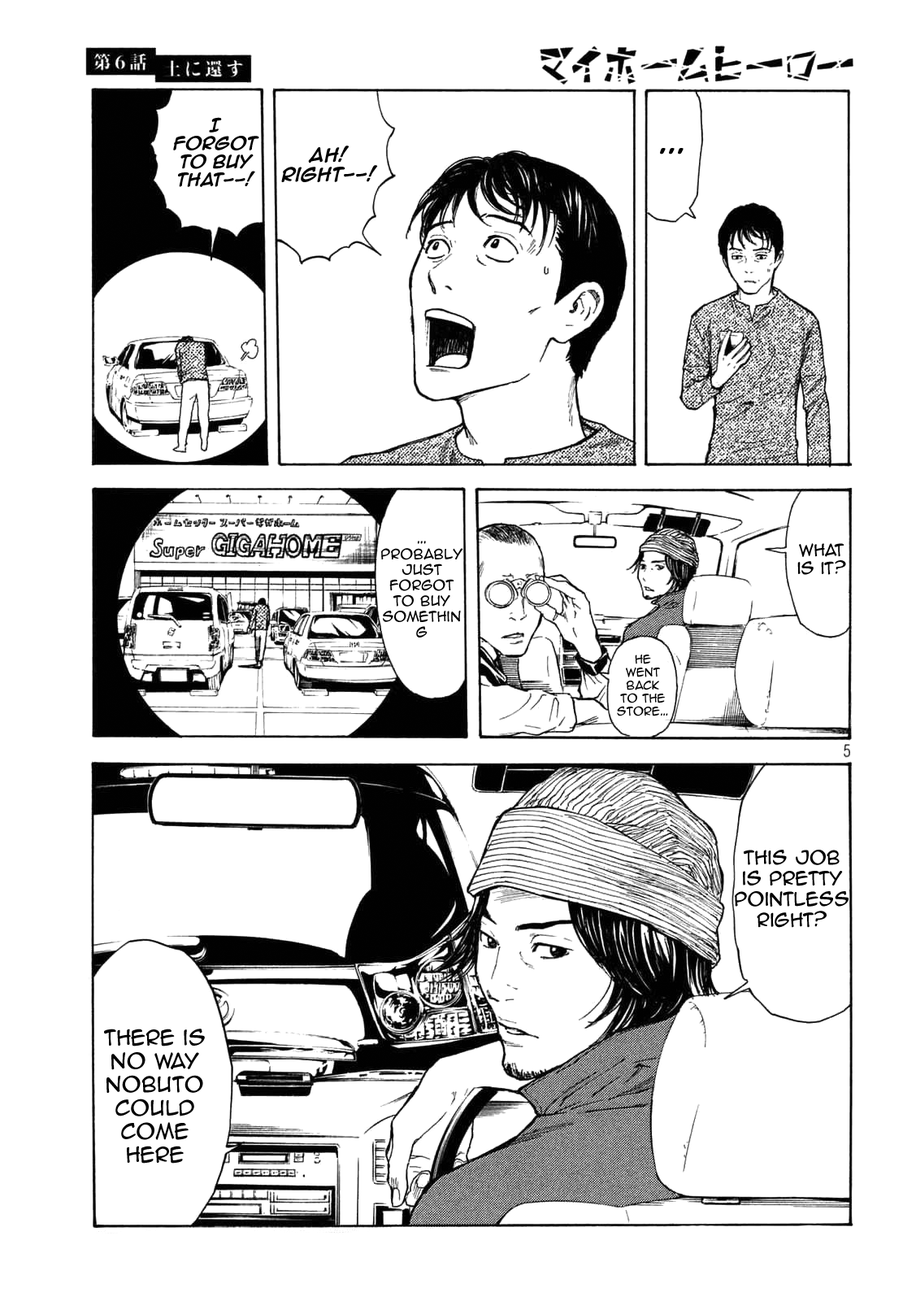
<style>
.page{position:relative;width:916px;height:1301px;background:#ffffff}
.page>*{position:absolute;margin:0}
.t1{font:15.2px "AnimeAce2.0BB-Bold";color:#000000}
.t2{font:16.3px "AnimeAce2.0BB-Bold";color:#000000}
.t3{font:24.9px "AnimeAce2.0BB-Bold";color:#000000}
.t4{font:13px "AnimeAce2.0BB";color:#000000}
.t5{font:15.2px "AnimeAce2.0BB";color:#000000}
.t6{font:10.8px "AnimeAce2.0BB";color:#000000}
.t7{font:17.4px "AnimeAce2.0BB";color:#000000}
.t8{font:19.5px "AnimeAce2.0BB";color:#000000}
</style>
<div class="page">
<p class="t1" style="left:173px;top:117px;width:86px;height:70px;text-align:center">I forgot to buy that--!</p>
<p class="t2" style="left:281px;top:146px;width:97px;height:36px;text-align:center">Ah! Right--!</p>
<p class="t3" style="left:660px;top:148px;width:24px;height:7px">...</p>
<p class="t4" style="left:381px;top:541px;width:83px;height:97px;text-align:center">… probably just forgot <br>to buy something</p>
<p class="t5" style="left:798px;top:543px;width:49px;height:32px;text-align:center">What is it?</p>
<p class="t6" style="left:617px;top:655px;width:51px;height:61px;text-align:center">He <br>went back <br>to the store…</p>
<p class="t7" style="left:735px;top:850px;width:114px;height:78px;text-align:center">This job <br>is pretty pointless right?</p>
<p class="t8" style="left:104px;top:1029px;width:101px;height:135px;text-align:center">There is no way Nobuto could come here</p>
</div>
